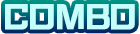
<style>
.page{position:relative;width:140px;height:34px;background:#c5fefb}
.page>*{position:absolute;margin:0}
.t1{font:28px "KafuTechnoStd-U";letter-spacing:-0.001em;color:#c5fefb;font-weight:bold}
</style>
<div class="page">
<p class="t1" style="left:5px;top:4px;width:130px;height:26px">COMBO</p>
</div>
